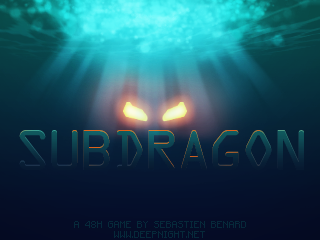
<style>
.page{position:relative;width:320px;height:240px}
.page>*{position:absolute;margin:0}
.t1{font:52px "OCRAStd";letter-spacing:-0.1em;text-transform:uppercase}
.t2{font:8px/9.3px "Minecraftia";color:#06293a;text-transform:uppercase}
</style>
<div class="page">
<p class="t1" style="left:19px;top:130px;width:285px;height:40px">SUBDRAGON</p>
<p class="t2" style="left:74px;top:221px;width:172px;height:17px;text-align:center">A 48h game by Sebastien Benard<br>www.deepnight.net</p>
</div>
